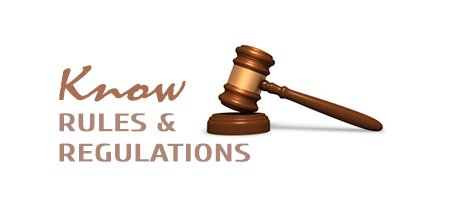
<style>
.page{position:relative;width:450px;height:212px;background:#ffffff}
.page>*{position:absolute;margin:0}
.t1{font:25.2px "Cuprum-Bold";color:#ad8675;scale:1.45 1}
.t2{font:50.4px "Mistral";color:#a76e50;scale:1.45 1}
</style>
<div class="page">
<p class="t1" style="left:59px;top:65px;width:191px;height:97px"><span class="t2">Know<br></span>RULES &amp;<br>REGULATIONS</p>
</div>
